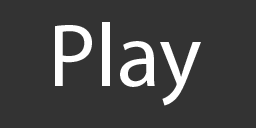
<style>
.page{position:relative;width:256px;height:128px;background:#333333}
.page>*{position:absolute;margin:0}
.t1{font:90px "MyriadPro-Regular";color:#ffffff}
</style>
<div class="page">
<p class="t1" style="left:55px;top:22px;width:146px;height:84px">Play</p>
</div>
